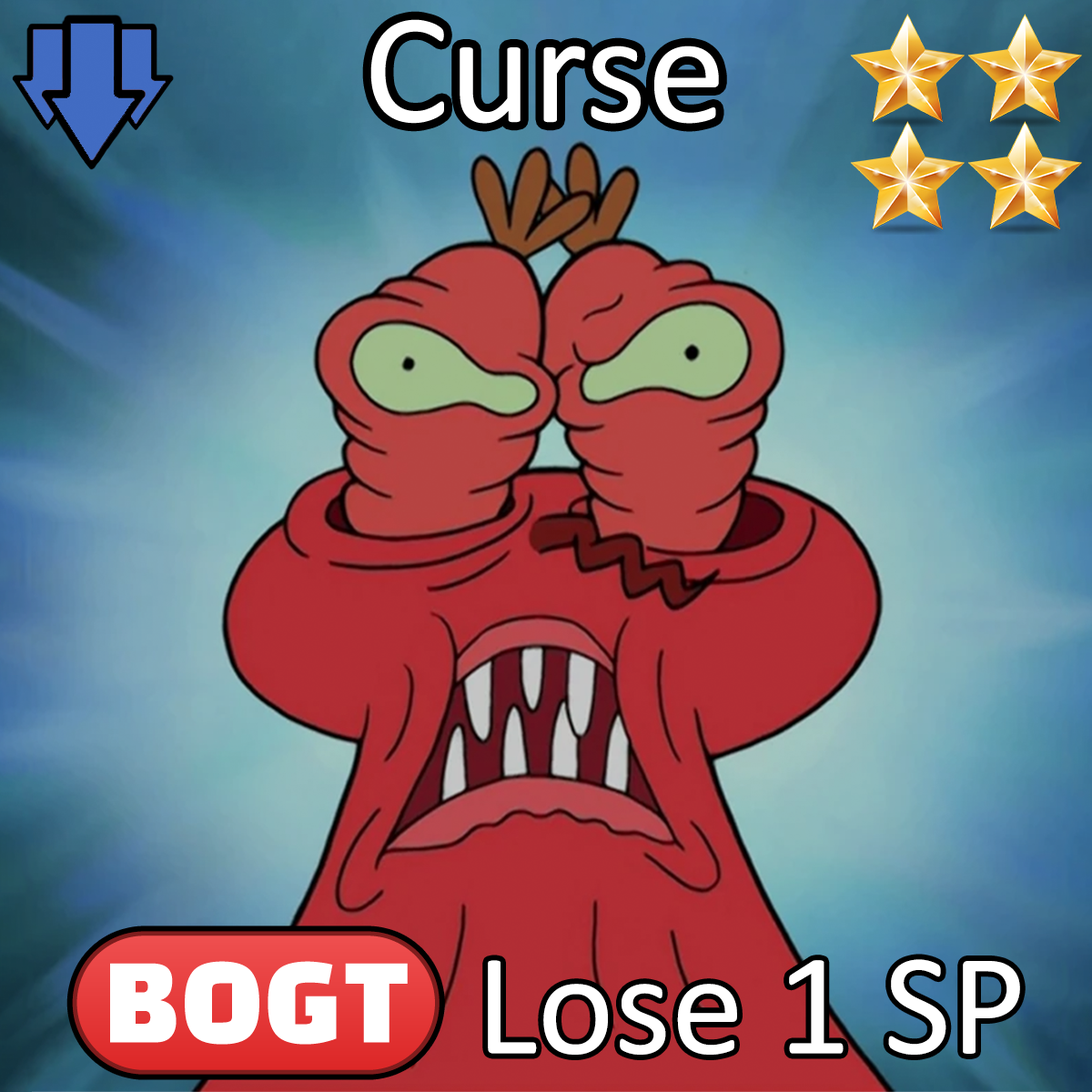
<style>
.page{position:relative;width:1092px;height:1092px}
.page>*{position:absolute;margin:0}
.t1{font:273px "Calibri";color:#ffffff}
.t2{font:250.2px "Calibri"}
.t3{font:250.2px "stoogedings-Regular"}
</style>
<div class="page">
<p class="t1" style="left:370px;top:19px;width:349px;height:105px">Curse</p>
<p class="t2" style="left:72px;top:931px;width:948px;height:144px"><span class="t3">(BOGT)</span> Lose 1 SP</p>
</div>
